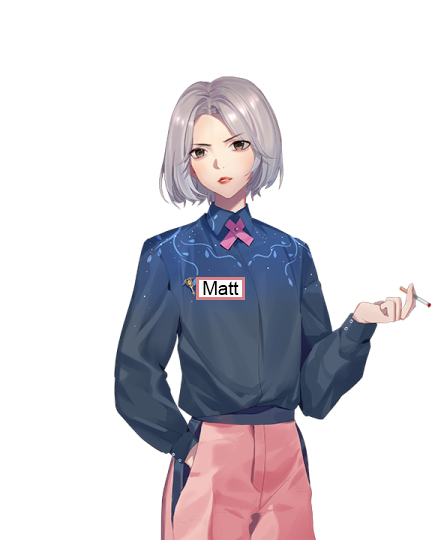
<style>
.page{position:relative;width:441px;height:540px;background:#ffffff}
.page>*{position:absolute;margin:0}
.t1{font:18.7px "ArialMT";color:#000000}
</style>
<div class="page">
<p class="t1" style="left:203px;top:281px;width:36px;height:14px">Matt</p>
</div>
